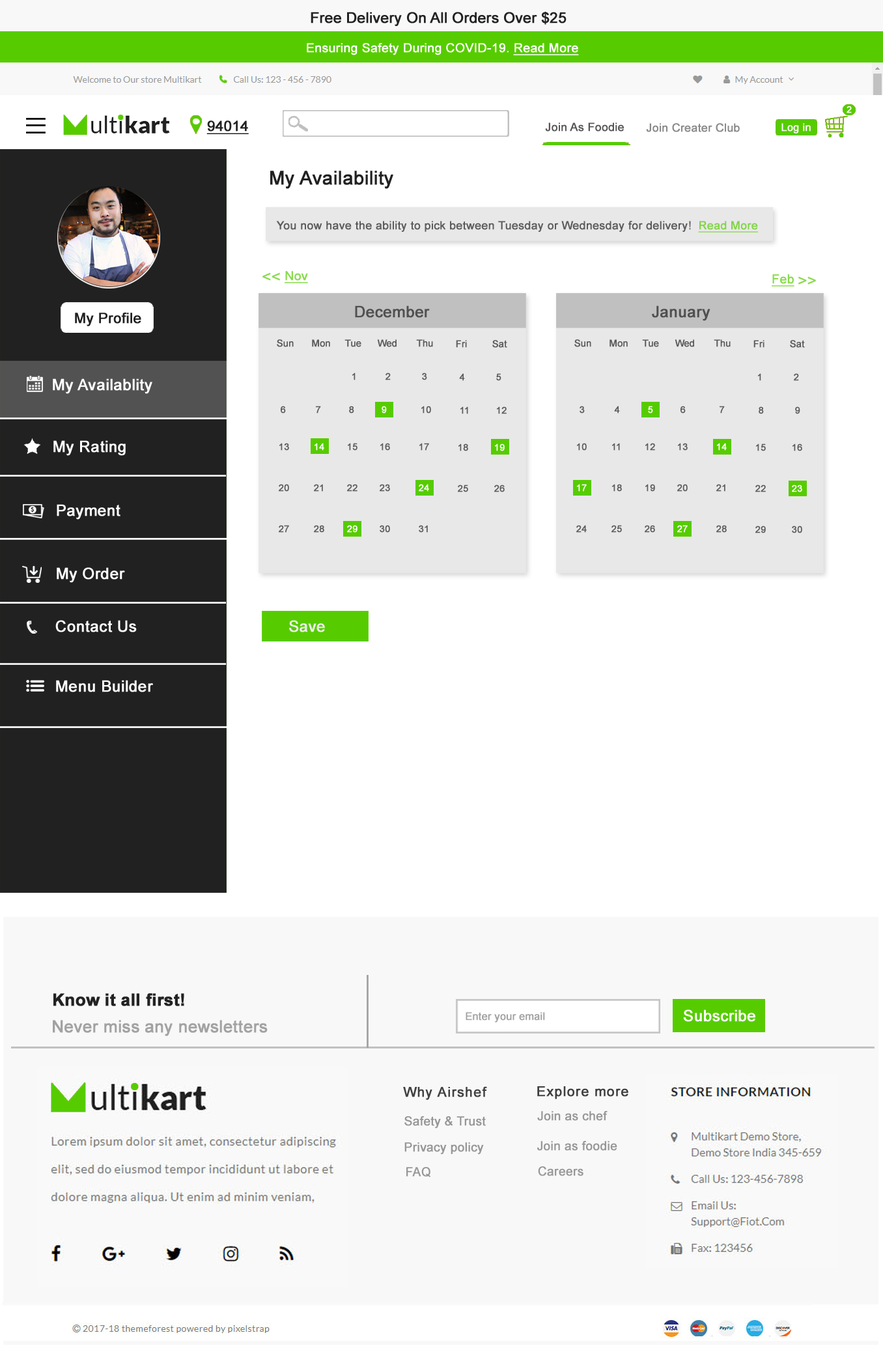
<style>
.page{position:relative;width:883px;height:1350px;background:#ffffff}
.page>*{position:absolute;margin:0}
.t1{font:14.6px "ArialMT";color:#222222;font-weight:bold}
.t2{font:12.5px "ArialMT";color:#ffffff;font-weight:bold}
.t3{font:12.5px "ArialMT";color:#ffffff;font-weight:bold;text-decoration:underline}
.t4{font:9.3px "ArialMT";color:#ffffff;font-weight:bold}
.t5{font:14.3px "ArialMT";color:#222222;font-weight:bold;text-decoration:underline}
.t6{font:11.4px "ArialMT";color:#585757;font-weight:bold}
.t7{font:11.4px "ArialMT";color:#8a8888;font-weight:bold}
.t8{font:10.4px "ArialMT";color:#ffffff;font-weight:bold}
.t9{font:18.8px "ArialMT";color:#212121;font-weight:bold}
.t10{font:11.5px "ArialMT";color:#5c5c5c;font-weight:bold}
.t11{font:11.5px "ArialMT";color:#5c5c5c;font-weight:bold;text-decoration:underline}
.t12{font:15.6px "ArialMT";color:#88db4c;font-weight:bold}
.t13{font:12.5px "ArialMT";color:#88db4c;font-weight:bold;text-decoration:underline}
.t14{font:15.6px "ArialMT";color:#505050;font-weight:bold}
.t15{font:14.3px "ArialMT";color:#212121;font-weight:bold}
.t16{font:9.4px "ArialMT";color:#5c5c5c;font-weight:bold}
.t17{font:15.7px "ArialMT";color:#ffffff;font-weight:bold}
.t18{font:9.4px "ArialMT";color:#ffffff;font-weight:bold}
.t19{font:15.6px "ArialMT";color:#ececec;font-weight:bold}
.t20{font:16.7px "Arial-BoldMT";color:#222222;font-weight:bold}
.t21{font:10.4px "ArialMT";color:#a3a2a2;font-weight:bold}
.t22{font:15.6px "ArialMT";color:#ffffff;font-weight:bold}
.t23{font:16.7px "ArialMT";color:#a3a2a2;font-weight:bold}
.t24{font:13.5px "ArialMT";letter-spacing:0.05em;color:#414141;font-weight:bold}
.t25{font:13.5px "ArialMT";letter-spacing:0.05em;color:#3e3e3e;font-weight:bold}
.t26{font:12.3px "ArialMT";color:#979696;font-weight:bold}
.t27{font:12.3px "ArialMT";color:#989797;font-weight:bold}
</style>
<div class="page">
<p class="t1" style="left:311px;top:12px;width:256px;height:14px">Free Delivery On All Orders Over $25</p>
<p class="t2" style="left:307px;top:43px;width:272px;height:12px">Ensuring Safety During COVID-19. <span class="t3">Read More</span></p>
<p class="t4" style="left:847px;top:106px;width:5px;height:7px">2</p>
<p class="t5" style="left:206px;top:120px;width:43px;height:14px">94014</p>
<p class="t6" style="left:545px;top:122px;width:79px;height:10px">Join As Foodie</p>
<p class="t7" style="left:646px;top:123px;width:94px;height:9px">Join Creater Club</p>
<p class="t8" style="left:782px;top:123px;width:29px;height:11px">Log in</p>
<p class="t9" style="left:270px;top:171px;width:123px;height:18px">My Availability</p>
<p class="t10" style="left:276px;top:221px;width:482px;height:12px">You now have the ability to pick between Tuesday or Wednesday for delivery!  <span class="t11">Read More</span></p>
<p class="t12" style="left:262px;top:273px;width:18px;height:8px">&lt;&lt;</p>
<p class="t13" style="left:285px;top:271px;width:23px;height:12px">Nov</p>
<p class="t13" style="left:772px;top:274px;width:23px;height:13px">Feb</p>
<p class="t12" style="left:799px;top:277px;width:17px;height:8px">&gt;&gt;</p>
<p class="t14" style="left:355px;top:305px;width:75px;height:13px">December</p>
<p class="t14" style="left:652px;top:305px;width:59px;height:16px">January</p>
<p class="t15" style="left:75px;top:313px;width:66px;height:13px">My Profile</p>
<p class="t16" style="left:277px;top:339px;width:17px;height:8px">Sun</p>
<p class="t16" style="left:312px;top:339px;width:18px;height:8px">Mon</p>
<p class="t16" style="left:345px;top:339px;width:16px;height:8px">Tue</p>
<p class="t16" style="left:377px;top:339px;width:20px;height:8px">Wed</p>
<p class="t16" style="left:416px;top:339px;width:17px;height:8px">Thu</p>
<p class="t16" style="left:456px;top:340px;width:11px;height:8px">Fri</p>
<p class="t16" style="left:492px;top:340px;width:15px;height:8px">Sat</p>
<p class="t16" style="left:574px;top:339px;width:17px;height:8px">Sun</p>
<p class="t16" style="left:610px;top:339px;width:18px;height:8px">Mon</p>
<p class="t16" style="left:642px;top:339px;width:17px;height:8px">Tue</p>
<p class="t16" style="left:675px;top:339px;width:19px;height:8px">Wed</p>
<p class="t16" style="left:714px;top:339px;width:17px;height:8px">Thu</p>
<p class="t16" style="left:754px;top:340px;width:11px;height:8px">Fri</p>
<p class="t16" style="left:790px;top:340px;width:15px;height:8px">Sat</p>
<p class="t16" style="left:352px;top:373px;width:4px;height:7px">1</p>
<p class="t16" style="left:386px;top:373px;width:5px;height:7px">2</p>
<p class="t16" style="left:422px;top:373px;width:5px;height:7px">3</p>
<p class="t16" style="left:459px;top:373px;width:6px;height:8px">4</p>
<p class="t16" style="left:496px;top:373px;width:6px;height:8px">5</p>
<p class="t16" style="left:758px;top:373px;width:3px;height:8px">1</p>
<p class="t16" style="left:794px;top:373px;width:5px;height:8px">2</p>
<p class="t17" style="left:53px;top:378px;width:99px;height:16px">My Availablity</p>
<p class="t16" style="left:281px;top:406px;width:5px;height:8px">6</p>
<p class="t16" style="left:316px;top:406px;width:5px;height:8px">7</p>
<p class="t16" style="left:349px;top:406px;width:5px;height:8px">8</p>
<p class="t18" style="left:382px;top:406px;width:5px;height:8px">9</p>
<p class="t16" style="left:421px;top:406px;width:10px;height:8px">10</p>
<p class="t16" style="left:460px;top:406px;width:8px;height:8px">11</p>
<p class="t16" style="left:497px;top:406px;width:10px;height:8px">12</p>
<p class="t16" style="left:580px;top:406px;width:5px;height:8px">3</p>
<p class="t16" style="left:614px;top:406px;width:6px;height:8px">4</p>
<p class="t18" style="left:648px;top:406px;width:5px;height:8px">5</p>
<p class="t16" style="left:681px;top:406px;width:5px;height:8px">6</p>
<p class="t16" style="left:720px;top:406px;width:5px;height:8px">7</p>
<p class="t16" style="left:759px;top:406px;width:5px;height:8px">8</p>
<p class="t16" style="left:795px;top:406px;width:5px;height:8px">9</p>
<p class="t17" style="left:53px;top:440px;width:73px;height:16px">My Rating</p>
<p class="t16" style="left:279px;top:443px;width:10px;height:8px">13</p>
<p class="t18" style="left:315px;top:443px;width:9px;height:8px">14</p>
<p class="t16" style="left:348px;top:443px;width:10px;height:8px">15</p>
<p class="t16" style="left:380px;top:443px;width:10px;height:8px">16</p>
<p class="t16" style="left:419px;top:443px;width:10px;height:8px">17</p>
<p class="t16" style="left:459px;top:444px;width:9px;height:7px">18</p>
<p class="t18" style="left:495px;top:444px;width:10px;height:7px">19</p>
<p class="t16" style="left:577px;top:443px;width:10px;height:8px">10</p>
<p class="t16" style="left:612px;top:443px;width:8px;height:8px">11</p>
<p class="t16" style="left:645px;top:443px;width:10px;height:8px">12</p>
<p class="t16" style="left:678px;top:443px;width:10px;height:8px">13</p>
<p class="t18" style="left:717px;top:443px;width:10px;height:8px">14</p>
<p class="t16" style="left:756px;top:444px;width:10px;height:7px">15</p>
<p class="t16" style="left:793px;top:444px;width:9px;height:7px">16</p>
<p class="t16" style="left:279px;top:484px;width:10px;height:8px">20</p>
<p class="t16" style="left:314px;top:484px;width:9px;height:8px">21</p>
<p class="t16" style="left:347px;top:484px;width:11px;height:8px">22</p>
<p class="t16" style="left:380px;top:484px;width:10px;height:8px">23</p>
<p class="t18" style="left:419px;top:484px;width:10px;height:8px">24</p>
<p class="t16" style="left:458px;top:485px;width:10px;height:7px">25</p>
<p class="t16" style="left:494px;top:485px;width:11px;height:7px">26</p>
<p class="t18" style="left:577px;top:484px;width:10px;height:8px">17</p>
<p class="t16" style="left:612px;top:484px;width:10px;height:8px">18</p>
<p class="t16" style="left:645px;top:484px;width:10px;height:8px">19</p>
<p class="t16" style="left:677px;top:484px;width:11px;height:8px">20</p>
<p class="t16" style="left:716px;top:484px;width:10px;height:8px">21</p>
<p class="t16" style="left:756px;top:485px;width:10px;height:7px">22</p>
<p class="t18" style="left:792px;top:485px;width:10px;height:7px">23</p>
<p class="t17" style="left:57px;top:504px;width:63px;height:16px">Payment</p>
<p class="t16" style="left:279px;top:525px;width:10px;height:8px">27</p>
<p class="t16" style="left:314px;top:525px;width:10px;height:8px">28</p>
<p class="t18" style="left:347px;top:525px;width:11px;height:8px">29</p>
<p class="t16" style="left:380px;top:525px;width:10px;height:8px">30</p>
<p class="t16" style="left:419px;top:525px;width:9px;height:8px">31</p>
<p class="t16" style="left:576px;top:525px;width:11px;height:8px">24</p>
<p class="t16" style="left:612px;top:525px;width:10px;height:8px">25</p>
<p class="t16" style="left:645px;top:525px;width:10px;height:8px">26</p>
<p class="t18" style="left:677px;top:525px;width:11px;height:8px">27</p>
<p class="t16" style="left:716px;top:525px;width:11px;height:8px">28</p>
<p class="t16" style="left:756px;top:526px;width:10px;height:7px">29</p>
<p class="t16" style="left:792px;top:526px;width:10px;height:7px">30</p>
<p class="t17" style="left:57px;top:567px;width:68px;height:16px">My Order</p>
<p class="t17" style="left:55px;top:620px;width:82px;height:12px">Contact Us</p>
<p class="t19" style="left:289px;top:620px;width:36px;height:12px">Save</p>
<p class="t17" style="left:56px;top:680px;width:97px;height:12px">Menu Builder</p>
<p class="t20" style="left:53px;top:993px;width:131px;height:13px">Know it all first!</p>
<p class="t21" style="left:466px;top:1012px;width:79px;height:11px">Enter your email</p>
<p class="t22" style="left:683px;top:1010px;width:73px;height:12px">Subscribe</p>
<p class="t23" style="left:53px;top:1020px;width:215px;height:16px">Never miss any newsletters</p>
<p class="t24" style="left:403px;top:1086px;width:84px;height:14px">Why Airshef</p>
<p class="t25" style="left:537px;top:1086px;width:92px;height:13px">Explore more</p>
<p class="t26" style="left:404px;top:1116px;width:82px;height:13px">Safety &amp; Trust</p>
<p class="t27" style="left:537px;top:1111px;width:71px;height:10px">Join as chef</p>
<p class="t26" style="left:404px;top:1142px;width:80px;height:13px">Privacy policy</p>
<p class="t27" style="left:537px;top:1141px;width:80px;height:10px">Join as foodie</p>
<p class="t26" style="left:406px;top:1167px;width:25px;height:11px">FAQ</p>
<p class="t27" style="left:538px;top:1166px;width:46px;height:10px">Careers</p>
</div>
